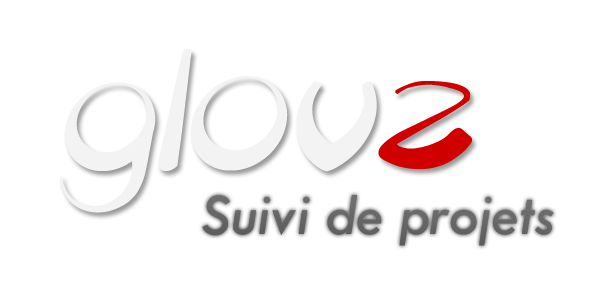
<style>
.page{position:relative;width:600px;height:300px;background:#ffffff}
.page>*{position:absolute;margin:0}
.t1{font:200px "Discoid";color:#f3f3f3;font-style:italic}
.t2{font:200px "Discoid";color:#d10000;font-style:italic}
.t3{font:60px "TwCenMT-Italic";color:#666666}
</style>
<div class="page">
<p class="t1" style="left:60px;top:49px;width:412px;height:164px">glov<span class="t2">z</span></p>
<p class="t3" style="left:202px;top:195px;width:352px;height:51px">Suivi de projets</p>
</div>
